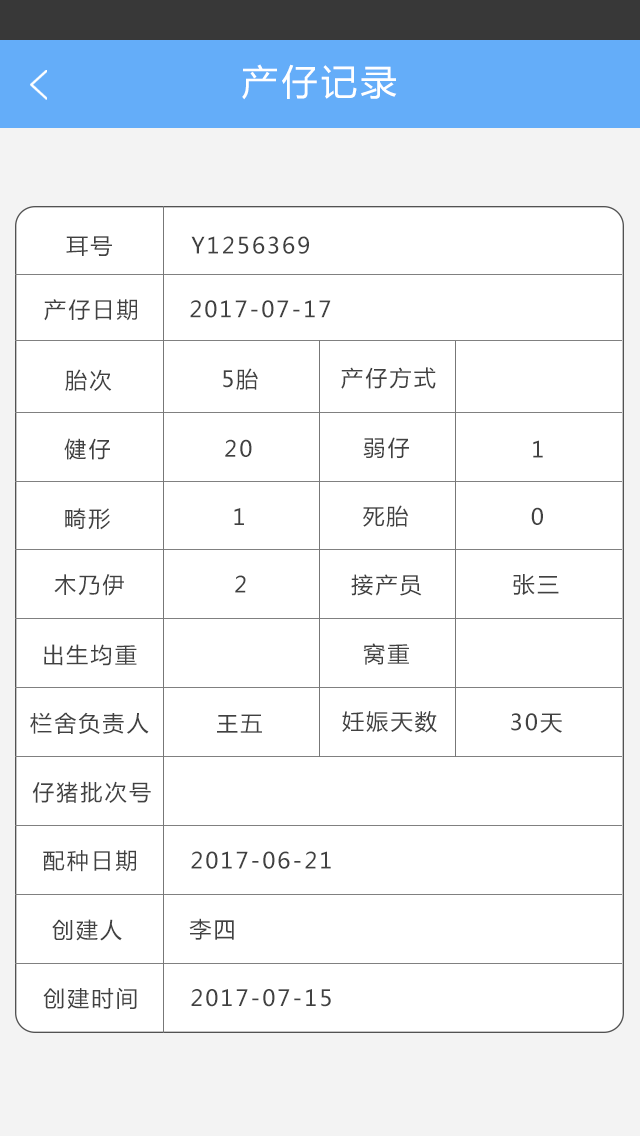
<style>
.page{position:relative;width:640px;height:1136px;background:#ffffff}
.page>*{position:absolute;margin:0}
.t1{font:36px "MicrosoftYaHei";letter-spacing:0.1em;color:#ffffff}
.t2{font:22px "MicrosoftYaHei";letter-spacing:0.1em;color:#414141}
</style>
<div class="page">
<p class="t1" style="left:242px;top:64px;width:155px;height:36px">产仔记录</p>
<p class="t2" style="left:66px;top:236px;width:46px;height:20px">耳号</p>
<p class="t2" style="left:191px;top:236px;width:118px;height:18px">Y1256369</p>
<p class="t2" style="left:44px;top:299px;width:93px;height:22px">产仔日期</p>
<p class="t2" style="left:190px;top:300px;width:141px;height:18px">2017-07-17</p>
<p class="t2" style="left:65px;top:369px;width:47px;height:22px">胎次</p>
<p class="t2" style="left:223px;top:368px;width:35px;height:22px">5胎</p>
<p class="t2" style="left:341px;top:367px;width:95px;height:22px">产仔方式</p>
<p class="t2" style="left:64px;top:438px;width:46px;height:22px">健仔</p>
<p class="t2" style="left:363px;top:437px;width:46px;height:22px">弱仔</p>
<p class="t2" style="left:225px;top:439px;width:27px;height:18px">20</p>
<p class="t2" style="left:533px;top:440px;width:10px;height:18px">1</p>
<p class="t2" style="left:65px;top:508px;width:45px;height:22px">畸形</p>
<p class="t2" style="left:234px;top:508px;width:10px;height:17px">1</p>
<p class="t2" style="left:363px;top:505px;width:46px;height:22px">死胎</p>
<p class="t2" style="left:531px;top:507px;width:12px;height:18px">0</p>
<p class="t2" style="left:54px;top:574px;width:70px;height:22px">木乃伊</p>
<p class="t2" style="left:235px;top:575px;width:11px;height:18px">2</p>
<p class="t2" style="left:351px;top:574px;width:71px;height:22px">接产员</p>
<p class="t2" style="left:513px;top:574px;width:46px;height:21px">张三</p>
<p class="t2" style="left:44px;top:644px;width:93px;height:22px">出生均重</p>
<p class="t2" style="left:363px;top:643px;width:46px;height:22px">窝重</p>
<p class="t2" style="left:30px;top:712px;width:119px;height:22px">栏舍负责人</p>
<p class="t2" style="left:342px;top:711px;width:95px;height:22px">妊娠天数</p>
<p class="t2" style="left:511px;top:713px;width:51px;height:20px">30天</p>
<p class="t2" style="left:217px;top:714px;width:45px;height:19px">王五</p>
<p class="t2" style="left:32px;top:781px;width:119px;height:22px">仔猪批次号</p>
<p class="t2" style="left:43px;top:850px;width:93px;height:22px">配种日期</p>
<p class="t2" style="left:191px;top:851px;width:140px;height:18px">2017-06-21</p>
<p class="t2" style="left:189px;top:918px;width:45px;height:22px">李四</p>
<p class="t2" style="left:52px;top:919px;width:70px;height:22px">创建人</p>
<p class="t2" style="left:43px;top:987px;width:94px;height:22px">创建时间</p>
<p class="t2" style="left:191px;top:989px;width:140px;height:18px">2017-07-15</p>
</div>
